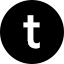
<style>
.page{position:relative;width:64px;height:64px;background:#000000}
.page>*{position:absolute;margin:0}
.t1{font:50px "GoogleSans-Medium";color:#ffffff}
</style>
<div class="page">
<p class="t1" style="left:23px;top:15px;width:17px;height:34px">t</p>
</div>
